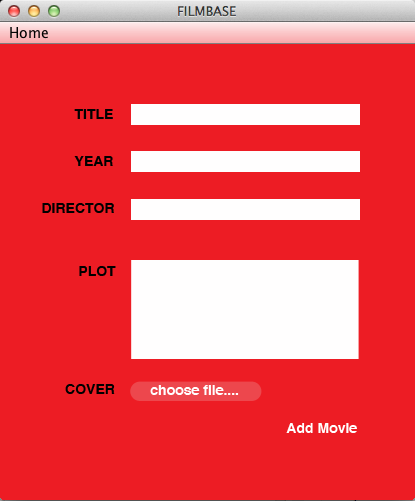
<style>
.page{position:relative;width:415px;height:501px;background:#ed1c24}
.page>*{position:absolute;margin:0}
.t1{font:14px "Helvetica-Bold";color:#000000}
.t2{font:14px "Helvetica-Bold";color:#ffffff}
</style>
<div class="page">
<p class="t1" style="left:74px;top:109px;width:39px;height:10px">TITLE</p>
<p class="t1" style="left:74px;top:156px;width:39px;height:10px">YEAR</p>
<p class="t1" style="left:42px;top:203px;width:72px;height:10px">DIRECTOR</p>
<p class="t1" style="left:79px;top:266px;width:37px;height:10px">PLOT</p>
<p class="t1" style="left:65px;top:384px;width:50px;height:10px">COVER</p>
<p class="t2" style="left:150px;top:385px;width:89px;height:10px">choose file....</p>
<p class="t2" style="left:286px;top:423px;width:71px;height:10px">Add Movie</p>
</div>
